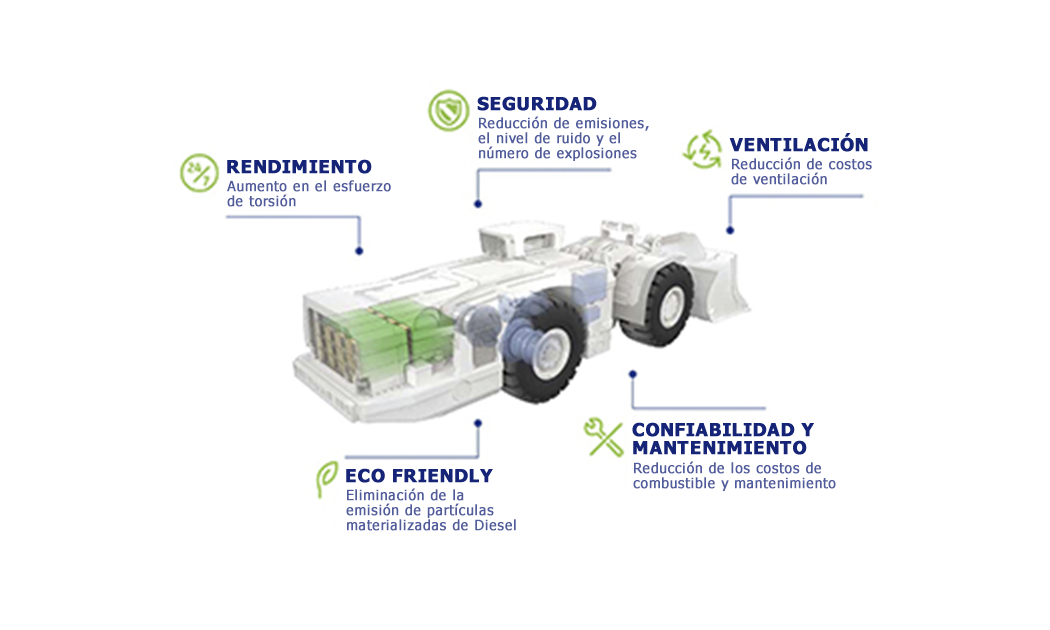
<style>
.page{position:relative;width:1050px;height:630px;background:#ffffff}
.page>*{position:absolute;margin:0}
.t1{font:18px "Tahoma-Bold";letter-spacing:0.025em;color:#152477;font-weight:bold}
.t2{font:14px/15px "Tahoma";letter-spacing:0.025em;color:#515c9d;font-weight:bold}
.t3{font:18px/18px "Tahoma-Bold";letter-spacing:0.025em;color:#152477;font-weight:bold}
</style>
<div class="page">
<p class="t1" style="left:477px;top:96px;width:120px;height:15px">SEGURIDAD</p>
<p class="t2" style="left:478px;top:116px;width:171px;height:45px">Reducción de emisiones, <br>el nivel de ruido y el<br>número de explosiones</p>
<p class="t1" style="left:729px;top:133px;width:139px;height:19px">VENTILACIÓN</p>
<p class="t1" style="left:227px;top:159px;width:145px;height:15px">RENDIMIENTO</p>
<p class="t2" style="left:731px;top:157px;width:141px;height:28px">Reducción de costos<br>de ventilación</p>
<p class="t2" style="left:227px;top:180px;width:164px;height:27px">Aumento en el esfuerzo<br>de torsión</p>
<p class="t3" style="left:632px;top:422px;width:182px;height:33px">CONFIABILIDAD Y<br>MANTENIMIENTO</p>
<p class="t2" style="left:633px;top:461px;width:203px;height:30px">Reducción de los costos de<br>combustible y mantenimiento</p>
<p class="t1" style="left:346px;top:468px;width:147px;height:15px">ECO FRIENDLY</p>
<p class="t2" style="left:346px;top:488px;width:170px;height:43px">Eliminación de la<br>emisión de partículas<br>materializadas de Diesel</p>
</div>
